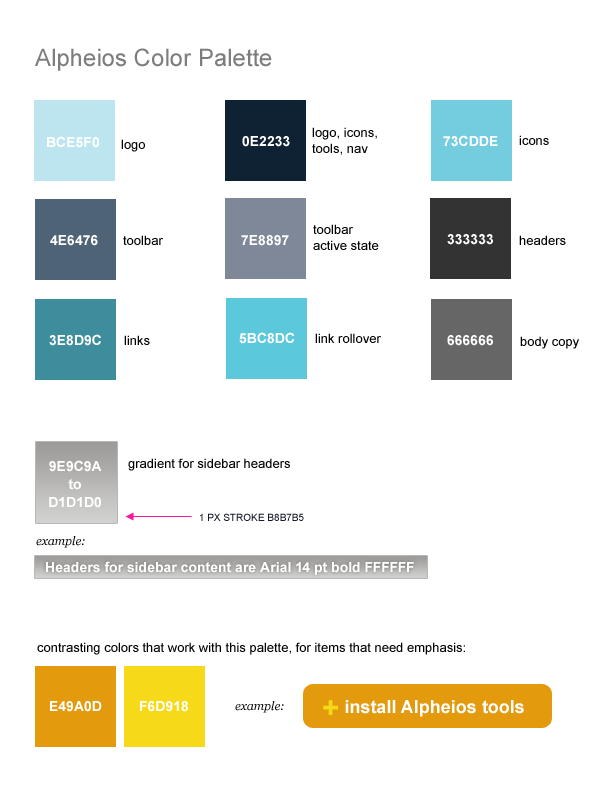
<style>
.page{position:relative;width:612px;height:792px;background:#ffffff}
.page>*{position:absolute;margin:0}
.t1{font:24px "ArialMT";color:#7d7d7d}
.t2{font:14px "Arial-BoldMT";color:#ffffff;text-transform:uppercase}
.t3{font:13px "ArialMT";color:#000000}
.t4{font:14px/18px "Arial-BoldMT";color:#ffffff;text-transform:uppercase}
.t5{font:14px/18px "Arial-BoldMT";color:#ffffff}
.t6{font:10px "ArialMT";color:#161a2a;text-transform:uppercase}
.t7{font:12px "Georgia-Italic";color:#000000}
.t8{font:14px "Arial-BoldMT";color:#ffffff}
.t9{font:18px "Arial-BoldMT";color:#ffffff}
.t10{font:30px "Arial-BoldMT";color:#f6d918}
</style>
<div class="page">
<p class="t1" style="left:35px;top:48px;width:237px;height:23px">Alpheios Color Palette</p>
<p class="t2" style="left:47px;top:136px;width:52px;height:12px">bce5f0</p>
<p class="t2" style="left:242px;top:136px;width:48px;height:11px">0e2233</p>
<p class="t3" style="left:312px;top:127px;width:65px;height:28px">logo, icons, <br>tools, nav</p>
<p class="t2" style="left:443px;top:135px;width:55px;height:12px">73cdde</p>
<p class="t3" style="left:519px;top:135px;width:30px;height:10px">icons</p>
<p class="t3" style="left:121px;top:139px;width:24px;height:13px">logo</p>
<p class="t3" style="left:313px;top:224px;width:66px;height:26px">toolbar <br>active state</p>
<p class="t2" style="left:50px;top:235px;width:48px;height:11px">4e6476</p>
<p class="t3" style="left:123px;top:235px;width:40px;height:10px">toolbar</p>
<p class="t2" style="left:241px;top:235px;width:48px;height:11px">7e8897</p>
<p class="t2" style="left:447px;top:234px;width:46px;height:11px">333333</p>
<p class="t3" style="left:519px;top:235px;width:47px;height:10px">headers</p>
<p class="t2" style="left:49px;top:334px;width:52px;height:12px">3e8d9c</p>
<p class="t3" style="left:124px;top:335px;width:26px;height:10px">links</p>
<p class="t2" style="left:239px;top:332px;width:56px;height:12px">5BC8DC</p>
<p class="t3" style="left:315px;top:333px;width:66px;height:10px">link rollover</p>
<p class="t2" style="left:447px;top:335px;width:46px;height:11px">666666</p>
<p class="t3" style="left:520px;top:336px;width:59px;height:13px">body copy</p>
<p class="t4" style="left:49px;top:460px;width:53px;height:48px;text-align:center">9E9C9A<br><span class="t5">to<br></span>d1d1d0</p>
<p class="t3" style="left:128px;top:458px;width:162px;height:13px">gradient for sidebar headers</p>
<p class="t6" style="left:200px;top:513px;width:104px;height:8px">1 px stroke b8b7b5</p>
<p class="t7" style="left:36px;top:536px;width:49px;height:12px">example:</p>
<p class="t8" style="left:46px;top:561px;width:368px;height:14px">Headers for sidebar content are Arial 14 pt bold FFFFFF</p>
<p class="t3" style="left:37px;top:642px;width:428px;height:13px">contrasting colors that work with this palette, for items that need emphasis:</p>
<p class="t2" style="left:50px;top:701px;width:52px;height:11px">e49a0d</p>
<p class="t2" style="left:140px;top:701px;width:48px;height:11px">f6d918</p>
<p class="t7" style="left:235px;top:701px;width:49px;height:12px">example:</p>
<p class="t9" style="left:323px;top:700px;width:201px;height:17px"><span class="t10">+ </span>install Alpheios tools</p>
</div>
